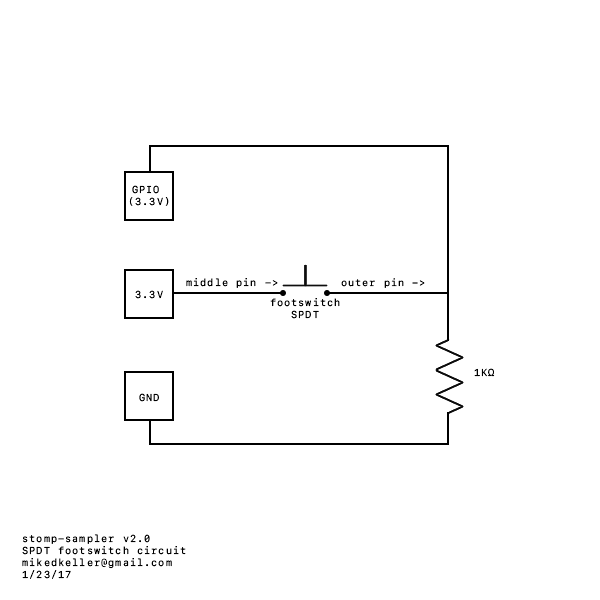
<style>
.page{position:relative;width:600px;height:600px;background:#ffffff}
.page>*{position:absolute;margin:0}
.t1{font:10px "SFMono-Regular";letter-spacing:0.1em;color:#000000}
.t2{font:9.7px "SFMono-Regular";letter-spacing:0.1em;color:#000000}
</style>
<div class="page">
<p class="t1" style="left:129px;top:185px;width:40px;height:21px;text-align:center">GPIO <br>(3.3V)</p>
<p class="t1" style="left:186px;top:278px;width:92px;height:10px">middle pin -&gt;</p>
<p class="t2" style="left:341px;top:278px;width:84px;height:10px">outer pin -&gt;</p>
<p class="t1" style="left:135px;top:290px;width:28px;height:9px">3.3V</p>
<p class="t1" style="left:270px;top:298px;width:70px;height:21px;text-align:center">footswitch<br>SPDT</p>
<p class="t1" style="left:474px;top:368px;width:21px;height:9px">1KΩ</p>
<p class="t1" style="left:139px;top:393px;width:20px;height:9px">GND</p>
<p class="t1" style="left:22px;top:534px;width:164px;height:45px">stomp-sampler v2.0<br>SPDT footswitch circuit<br>mikedkeller@gmail.com<br>1/23/17</p>
</div>
